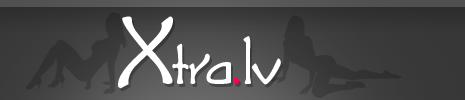
<style>
.page{position:relative;width:465px;height:100px}
.page>*{position:absolute;margin:0}
.t1{font:56.4px "ArgonautRegularSWFTE";letter-spacing:-0.05em;color:#ffffff}
.t2{font:77.6px "ArgonautRegularSWFTE";letter-spacing:-0.05em;color:#ffffff}
.t3{font:56.4px "ArgonautRegularSWFTE";letter-spacing:-0.05em;color:#fc005a}
</style>
<div class="page">
<p class="t1" style="left:118px;top:16px;width:163px;height:73px"><span class="t2">X</span>tra<span class="t3">.</span>lv</p>
</div>
